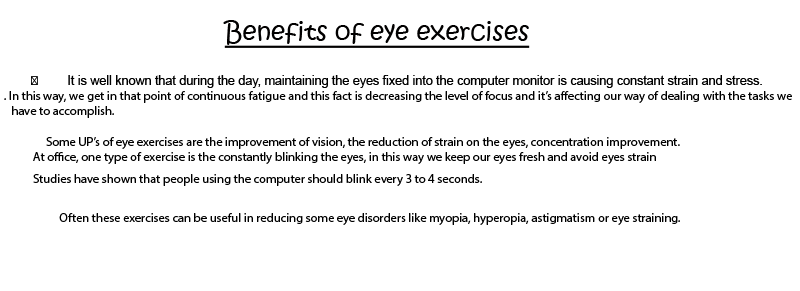
<style>
.page{position:relative;width:800px;height:291px;background:#ffffff}
.page>*{position:absolute;margin:0}
.t1{font:25px "KristenITC-Regular";color:#010000;text-decoration:underline}
.t2{font:12.5px "MyriadPro-Regular";color:#000000}
</style>
<div class="page">
<p class="t1" style="left:223px;top:20px;width:307px;height:28px">Benefits of eye exercises</p>
<p class="t2" style="left:4px;top:91px;width:788px;height:12px">. In this way, we get in that point of continuous fatigue and this fact is decreasing the level of focus and it’s affecting our way of dealing with the tasks we</p>
<p class="t2" style="left:12px;top:106px;width:102px;height:12px">have to accomplish.</p>
<p class="t2" style="left:46px;top:137px;width:634px;height:12px">Some UP’s of eye exercises are the improvement of vision, the reduction of strain on the eyes, concentration improvement.</p>
<p class="t2" style="left:33px;top:152px;width:623px;height:12px">At office, one type of exercise is the constantly blinking the eyes, in this way we keep our eyes fresh and avoid eyes strain</p>
<p class="t2" style="left:33px;top:174px;width:449px;height:12px">Studies have shown that people using the computer should blink every 3 to 4 seconds.</p>
<p class="t2" style="left:59px;top:213px;width:621px;height:12px">Often these exercises can be useful in reducing some eye disorders like myopia, hyperopia, astigmatism or eye straining.</p>
</div>
